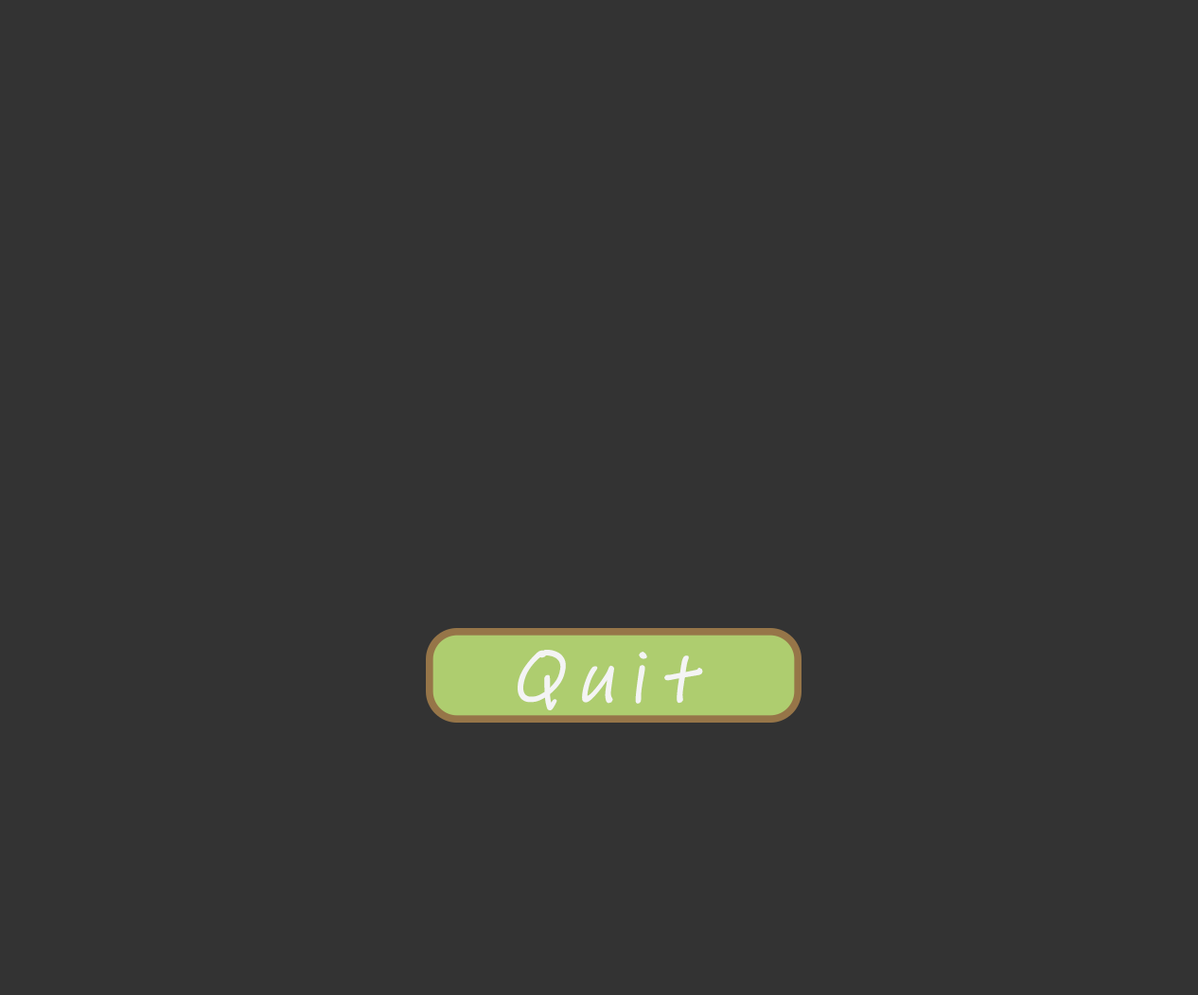
<style>
.page{position:relative;width:1198px;height:995px;background:#333333}
.page>*{position:absolute;margin:0}
.t1{font:70.6px "InkFree";letter-spacing:0.2em;color:#f4f4f4;font-weight:bold;font-style:italic}
</style>
<div class="page">
<p class="t1" style="left:518px;top:650px;width:185px;height:61px">Quit</p>
</div>
